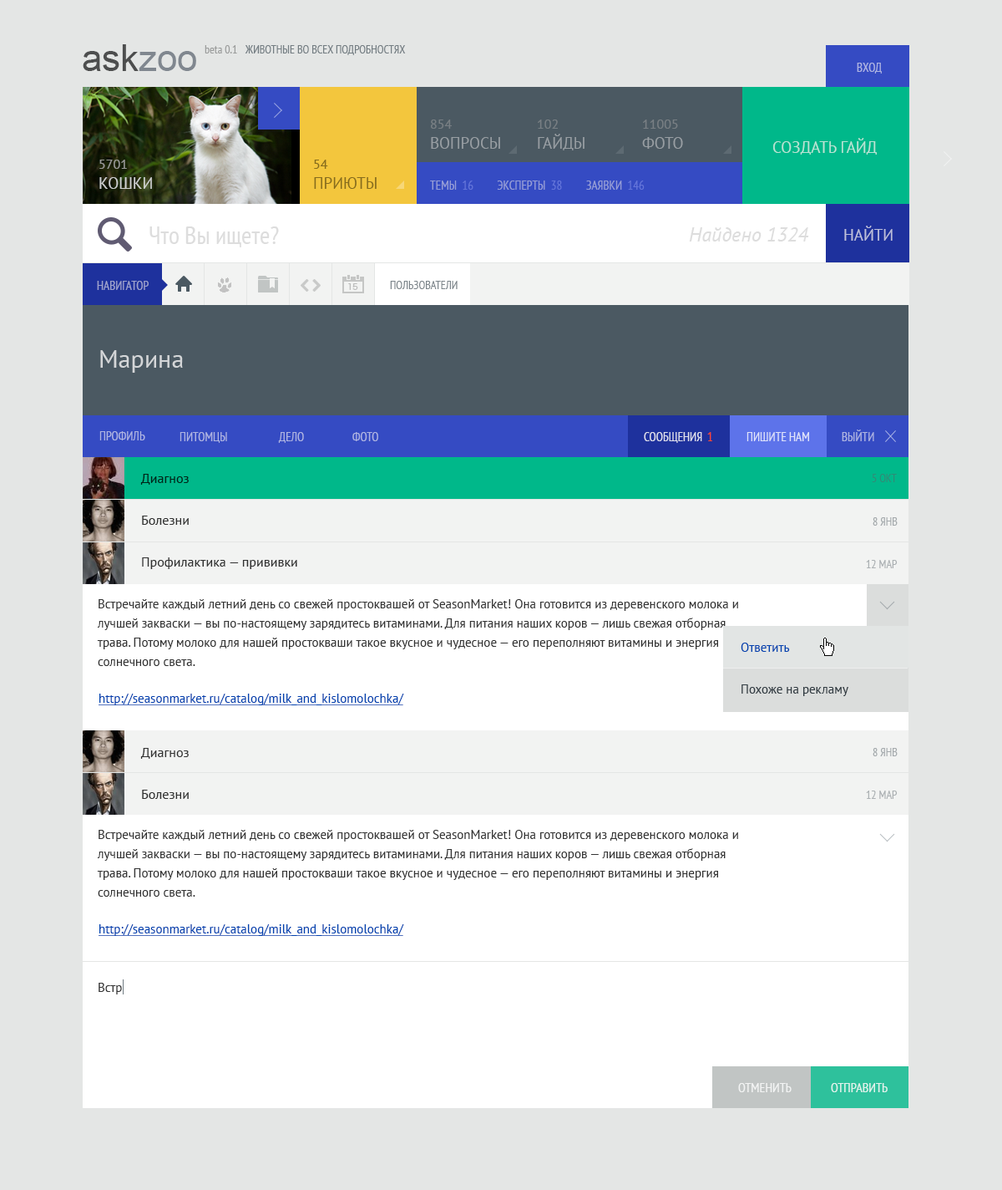
<style>
.page{position:relative;width:1002px;height:1190px;background:#ffffff}
.page>*{position:absolute;margin:0}
.t1{font:12.5px "PTSans-Narrow";color:#aeb4e2;text-transform:uppercase}
.t2{font:12.5px "PTSans-Narrow";color:#9ea3cd;text-transform:uppercase}
.t3{font:11.7px "PTSans-Narrow";color:#7b848a;text-transform:uppercase}
.t4{font:25.1px "PTSans-Regular";color:#d4d6d8}
.t5{font:12.5px "PTSans-Narrow";color:#dfe0ed;text-transform:uppercase}
.t6{font:12.5px "PTSans-Narrow";color:#fd482e;text-transform:uppercase}
.t7{font:12.5px "PTSans-Narrow";color:#dfe3fa;text-transform:uppercase}
.t8{font:13.4px/41.8px "PTSans-Regular";color:#313131}
.t9{font:11.7px "PTSans-Narrow";color:#2d8d77;text-transform:uppercase}
.t10{font:11.7px "PTSans-Narrow";color:#a4a9ac;text-transform:uppercase}
.t11{font:11.7px "PTSans-Narrow";color:#abb0b3;text-transform:uppercase}
.t12{font:12.5px/19.2px "PTSans-Regular";color:#343434}
.t13{font:12.5px/41.8px "PTSans-Regular";color:#323c43}
.t14{font:12.5px/41.8px "PTSans-Regular";color:#0042af}
.t15{font:12.5px "PTSans-Regular";color:#0042af;text-decoration:underline}
.t16{font:12.5px "PTSans-Regular";color:#343434}
.t17{font:13.4px "PTSans-Narrow";color:#ffffff;text-transform:uppercase}
.t18{font:13.4px "PTSans-Narrow";color:#e0f3ed;text-transform:uppercase}
</style>
<div class="page">
<p class="t1" style="left:857px;top:63px;width:25px;height:11px">вход</p>
<p class="t2" style="left:97px;top:281px;width:52px;height:9px">навигатор</p>
<p class="t3" style="left:390px;top:281px;width:68px;height:8px">пользователи</p>
<p class="t4" style="left:100px;top:350px;width:83px;height:23px">Марина</p>
<p class="t1" style="left:99px;top:431px;width:46px;height:9px">профиль</p>
<p class="t1" style="left:180px;top:432px;width:47px;height:11px">питомцы</p>
<p class="t1" style="left:278px;top:432px;width:26px;height:11px">дело</p>
<p class="t1" style="left:353px;top:432px;width:25px;height:9px">фото</p>
<p class="t5" style="left:644px;top:432px;width:59px;height:11px">сообщения</p>
<p class="t6" style="left:708px;top:432px;width:5px;height:9px">1</p>
<p class="t7" style="left:747px;top:432px;width:62px;height:9px">пишите нам</p>
<p class="t1" style="left:842px;top:429px;width:33px;height:12px">выйти</p>
<p class="t8" style="left:140px;top:474px;width:157px;height:95px">Диагноз<br>Болезни<br>Профилактика — прививки</p>
<p class="t9" style="left:872px;top:474px;width:25px;height:8px">5 окт</p>
<p class="t10" style="left:873px;top:517px;width:25px;height:8px">8 янв</p>
<p class="t11" style="left:866px;top:560px;width:32px;height:8px">12 мар</p>
<p class="t12" style="left:97px;top:599px;width:641px;height:67px">Встречайте каждый летний день со свежей простоквашей от SeasonMarket! Она готовится из деревенского молока и лучшей закваски — вы по-настоящему зарядитесь витаминами. Для питания наших коров — лишь свежая отборная трава. Потому молоко для нашей простокваши такое вкусное и чудесное — его переполняют витамины и энергия солнечного света.</p>
<p class="t13" style="left:741px;top:642px;width:108px;height:54px"><span class="t14">Ответить<br></span>Похоже на рекламу</p>
<p class="t15" style="left:99px;top:693px;width:305px;height:12px">http://seasonmarket.ru/catalog/milk_and_kislomolochka/</p>
<p class="t8" style="left:140px;top:748px;width:49px;height:51px">Диагноз<br>Болезни</p>
<p class="t10" style="left:873px;top:748px;width:25px;height:8px">8 янв</p>
<p class="t11" style="left:866px;top:790px;width:32px;height:9px">12 мар</p>
<p class="t12" style="left:97px;top:830px;width:641px;height:66px">Встречайте каждый летний день со свежей простоквашей от SeasonMarket! Она готовится из деревенского молока и лучшей закваски — вы по-настоящему зарядитесь витаминами. Для питания наших коров — лишь свежая отборная трава. Потому молоко для нашей простокваши такое вкусное и чудесное — его переполняют витамины и энергия солнечного света.</p>
<p class="t15" style="left:99px;top:924px;width:305px;height:12px">http://seasonmarket.ru/catalog/milk_and_kislomolochka/</p>
<p class="t16" style="left:99px;top:982px;width:23px;height:12px">Встр</p>
<p class="t17" style="left:738px;top:1083px;width:54px;height:9px;opacity:0.8">отменить</p>
<p class="t18" style="left:831px;top:1083px;width:57px;height:9px">отправить</p>
</div>
